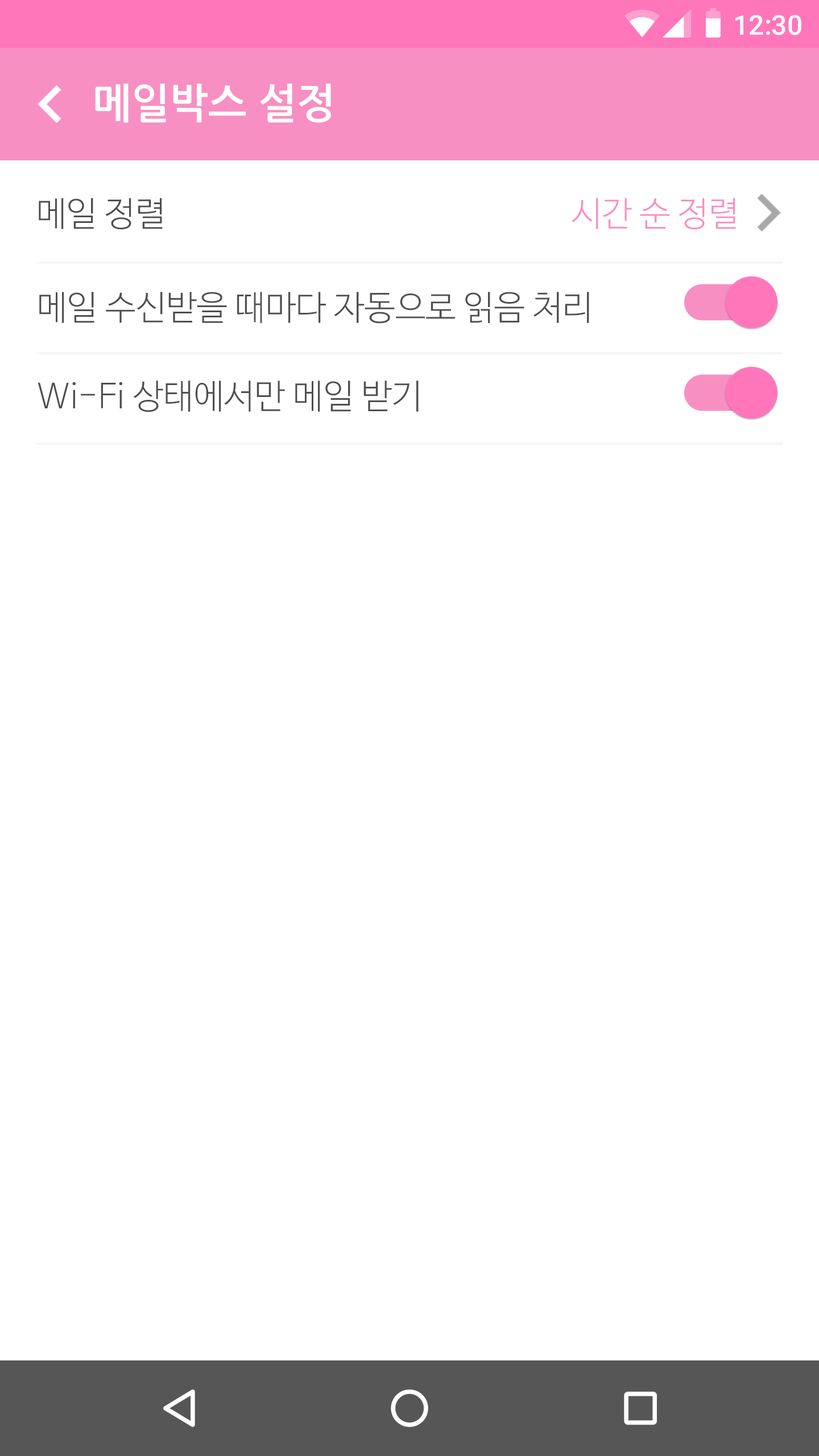
<style>
.page{position:relative;width:819px;height:1456px;background:#ffffff}
.page>*{position:absolute;margin:0}
.t1{font:27.3px "Roboto-Medium";color:#ffffff}
.t2{font:40.9px "NanumGothicBold";color:#ffffff}
.t3{font:34.2px "NanumBarunGothicLight";color:#f78fc2}
.t4{font:34.2px "NanumBarunGothicLight";color:#4f4f4f}
</style>
<div class="page">
<p class="t1" style="left:735px;top:15px;width:66px;height:20px">12:30</p>
<p class="t2" style="left:95px;top:84px;width:236px;height:39px">메일박스 설정</p>
<p class="t3" style="left:39px;top:198px;width:697px;height:32px"><span class="t4">메일 정렬                                                     </span>시간 순 정렬</p>
<p class="t4" style="left:39px;top:292px;width:550px;height:32px">메일 수신받을 때마다 자동으로 읽음 처리</p>
<p class="t4" style="left:38px;top:380px;width:381px;height:32px">Wi-Fi 상태에서만 메일 받기</p>
</div>
